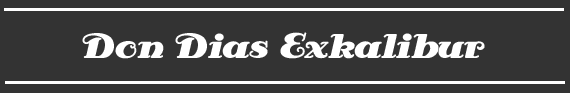
<style>
.page{position:relative;width:570px;height:93px;background:#333333}
.page>*{position:absolute;margin:0}
.t1{font:35px "AntsyPants";color:#ffffff}
</style>
<div class="page">
<p class="t1" style="left:82px;top:32px;width:403px;height:27px">Don Dias Exkalibur</p>
</div>
